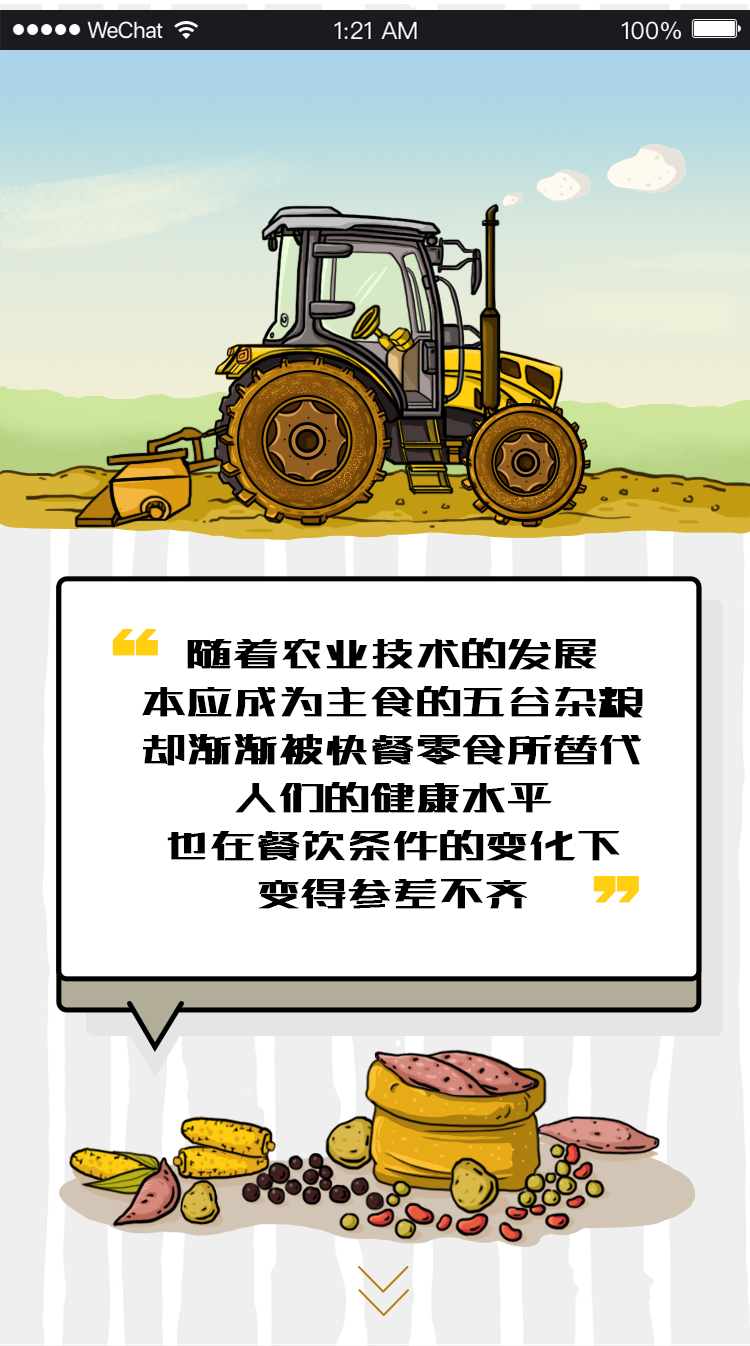
<style>
.page{position:relative;width:750px;height:1346px;background:#ffffff}
.page>*{position:absolute;margin:0}
.t1{font:100px "zcool-gdh";color:#ffcf10;font-weight:bold}
.t2{font:48px/48px "zcool-gdh";letter-spacing:-0.075em;color:#000000;font-weight:bold}
</style>
<div class="page">
<p class="t1" style="left:112px;top:629px;width:46px;height:27px">“</p>
<p class="t2" style="left:142px;top:638px;width:501px;height:271px;text-align:center">随着农业技术的发展<br>本应成为主食的五谷杂粮<br>却渐渐被快餐零食所替代<br>人们的健康水平<br>也在餐饮条件的变化下<br>变得参差不齐</p>
<p class="t1" style="left:593px;top:876px;width:46px;height:27px">”</p>
</div>
